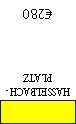
<style>
.page{position:relative;width:76px;height:124px;background:#ffffff}
.page>*{position:absolute;margin:0}
.t1{font:14px "MyriadPro-Regular";color:#000000}
.t2{font:12px "AdobeDevanagari-Regular";color:#000000;scale:0.9 1}
</style>
<div class="page">
<p class="t1" style="left:23px;top:9px;width:29px;height:10px;rotate:180deg">€280</p>
<p class="t2" style="left:6px;top:74px;width:64px;height:22px;text-align:center;rotate:180deg">HASSELBACH-<br>PLATZ</p>
</div>
